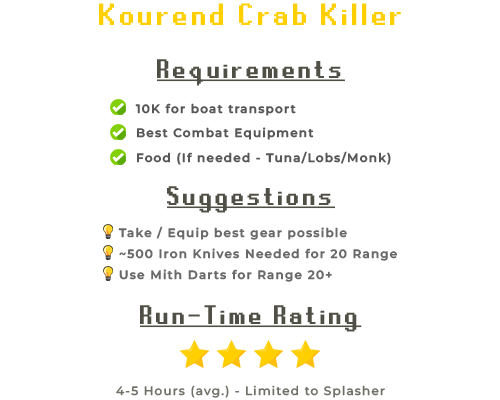
<style>
.page{position:relative;width:500px;height:400px;background:#ffffff}
.page>*{position:absolute;margin:0}
.t1{font:34.6px "RuneScape-UF";letter-spacing:0.1em;color:#ffcf00}
.t2{font:30px "RuneScape-UF";letter-spacing:0.1em;color:#504f46;text-decoration:underline}
.t3{font:12px "MontserratRoman-SemiBold";letter-spacing:0.1em;color:#575757}
.t4{font:12px "MontserratRoman-SemiBold";letter-spacing:0.1em;color:#696969}
.t5{font:12px "MontserratRoman-Medium";letter-spacing:0.1em;color:#717067}
</style>
<div class="page">
<p class="t1" style="left:99px;top:3px;width:302px;height:22px">Kourend Crab Killer</p>
<p class="t2" style="left:157px;top:59px;width:188px;height:27px">Requirements</p>
<p class="t3" style="left:135px;top:103px;width:161px;height:13px">10K for boat transport</p>
<p class="t3" style="left:137px;top:127px;width:177px;height:13px">Best Combat Equipment</p>
<p class="t3" style="left:137px;top:151px;width:254px;height:14px">Food (If needed - Tuna/Lobs/Monk)</p>
<p class="t2" style="left:167px;top:186px;width:168px;height:27px">Suggestions</p>
<p class="t4" style="left:118px;top:226px;width:229px;height:14px">Take / Equip best gear possible</p>
<p class="t4" style="left:119px;top:248px;width:278px;height:13px">~500 Iron Knives Needed for 20 Range</p>
<p class="t4" style="left:119px;top:269px;width:213px;height:13px">Use Mith Darts for Range 20+</p>
<p class="t2" style="left:140px;top:305px;width:222px;height:27px">Run-Time Rating</p>
<p class="t5" style="left:116px;top:385px;width:269px;height:13px">4-5 Hours (avg.) - Limited to Splasher</p>
</div>
